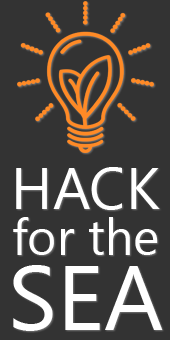
<style>
.page{position:relative;width:170px;height:340px;background:#333333}
.page>*{position:absolute;margin:0}
.t1{font:50px/45.8px "Gadugi";color:#ffffff}
.t2{font:58.3px "Gadugi";color:#ffffff}
.t3{font:91.7px/75px "Gadugi";color:#ffffff}
</style>
<div class="page">
<p class="t1" style="left:13px;top:167px;width:150px;height:164px;text-align:center"><span class="t2">HACK<br></span>for the<br><span class="t3">SEA</span></p>
</div>
